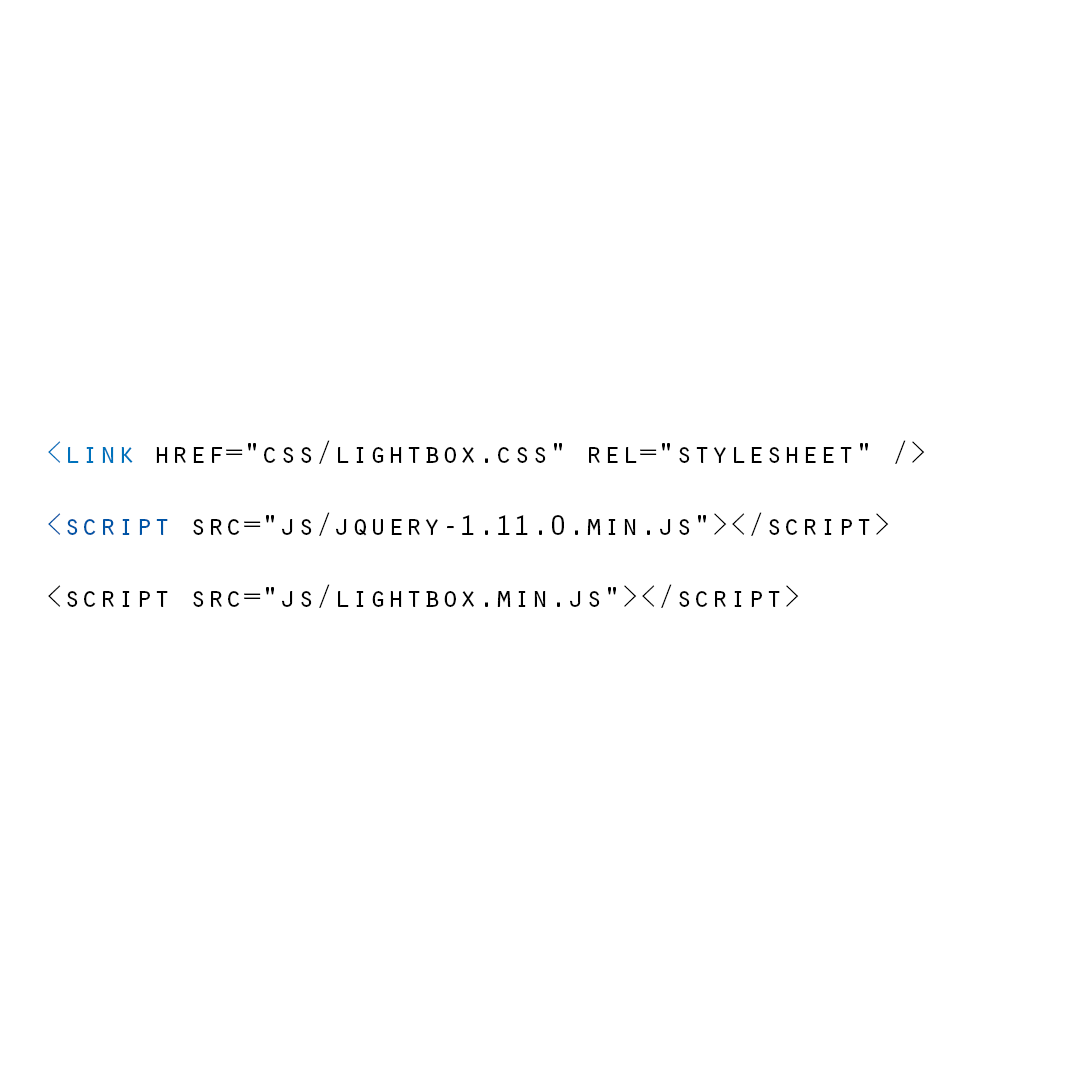
<style>
.page{position:relative;width:1070px;height:1070px;background:#ffffff}
.page>*{position:absolute;margin:0}
.t1{font:30px "OratorStd";color:#000000}
.t2{font:30px "OratorStd";color:#0072bc}
.t3{font:30px "OratorStd";color:#0054a6}
</style>
<div class="page">
<p class="t1" style="left:48px;top:440px;width:877px;height:168px"><span class="t2">&lt;link </span>href="css/lightbox.css" rel="stylesheet" /&gt;<br><br><span class="t3">&lt;script </span>src="js/jquery-1.11.0.min.js"&gt;&lt;/script&gt;<br><br>&lt;script src="js/lightbox.min.js"&gt;&lt;/script&gt;</p>
</div>
